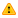
<style>
.page{position:relative;width:18px;height:18px;background:#ffffff}
.page>*{position:absolute;margin:0}
.t1{font:9px "EngraversMT-Bold";letter-spacing:-0.04em}
</style>
<div class="page">
<p class="t1" style="left:7px;top:6px;width:4px;height:7px">!</p>
</div>
